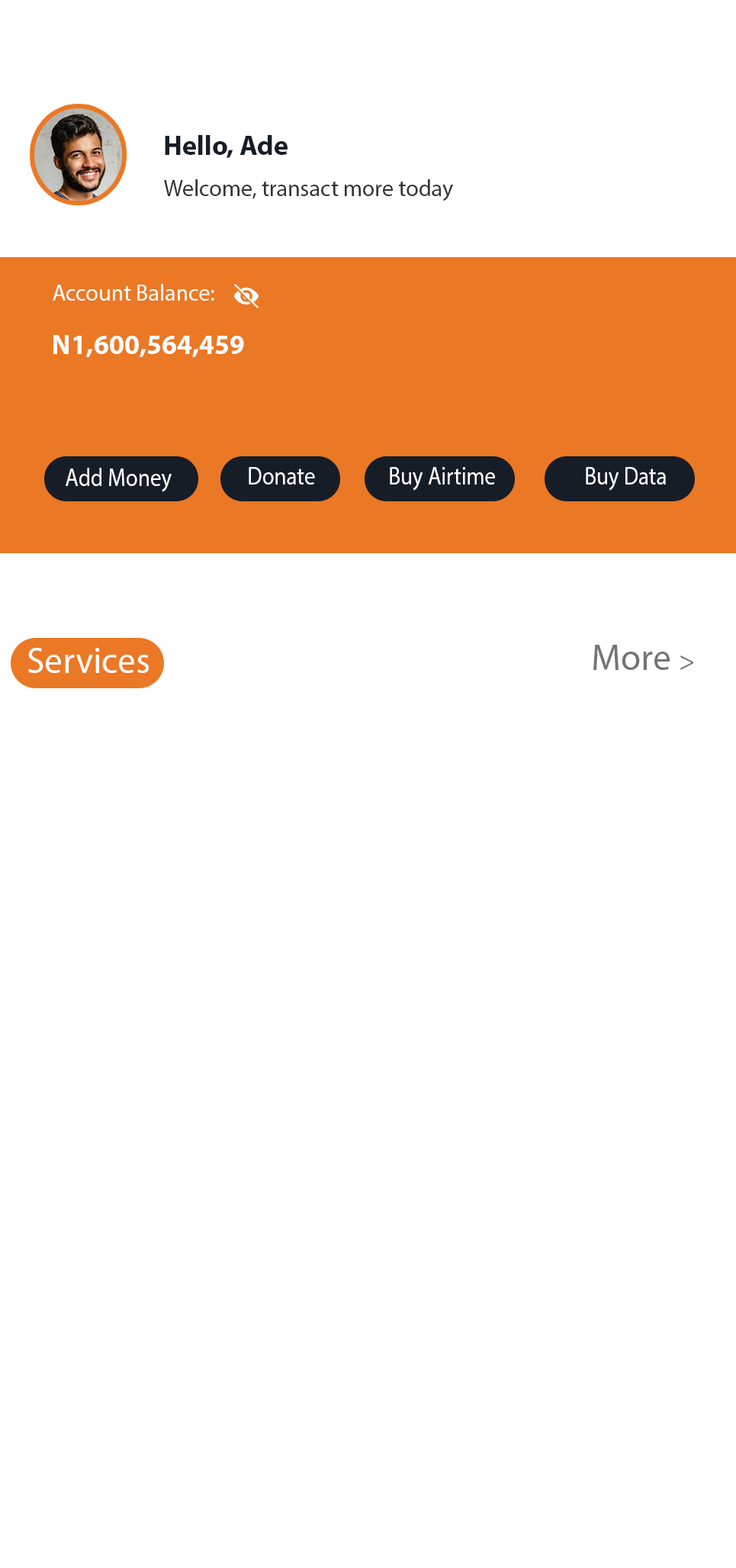
<style>
.page{position:relative;width:736px;height:1568px;background:#ffffff}
.page>*{position:absolute;margin:0}
.t1{font:27.5px "MyriadPro-Bold";color:#171d27}
.t2{font:22.9px "MyriadPro-Regular";color:#333333}
.t3{font:22.9px "MyriadPro-Regular";color:#fefefe}
.t4{font:27.5px "MyriadPro-Bold";color:#ffffff}
.t5{font:25.3px "MyriadPro-Regular";color:#ffffff;scale:0.87 1}
.t6{font:36.3px "MyriadPro-Regular";color:#ffffff}
.t7{font:36.6px "MyriadPro-Regular";color:#747474}
.t8{font:27.5px "MyriadPro-Regular";color:#747474}
</style>
<div class="page">
<p class="t1" style="left:165px;top:135px;width:123px;height:23px">Hello, Ade</p>
<p class="t2" style="left:164px;top:179px;width:289px;height:22px">Welcome, transact more today</p>
<p class="t3" style="left:53px;top:284px;width:161px;height:17px">Account Balance:</p>
<p class="t4" style="left:53px;top:335px;width:191px;height:22px">N1,600,564,459</p>
<p class="t5" style="left:66px;top:468px;width:106px;height:24px">Add Money</p>
<p class="t5" style="left:249px;top:467px;width:66px;height:18px">Donate</p>
<p class="t5" style="left:390px;top:467px;width:105px;height:24px">Buy Airtime</p>
<p class="t5" style="left:586px;top:467px;width:80px;height:24px">Buy Data</p>
<p class="t6" style="left:28px;top:648px;width:121px;height:25px">Services</p>
<p class="t7" style="left:594px;top:645px;width:100px;height:25px">More <span class="t8">&gt;</span></p>
</div>
